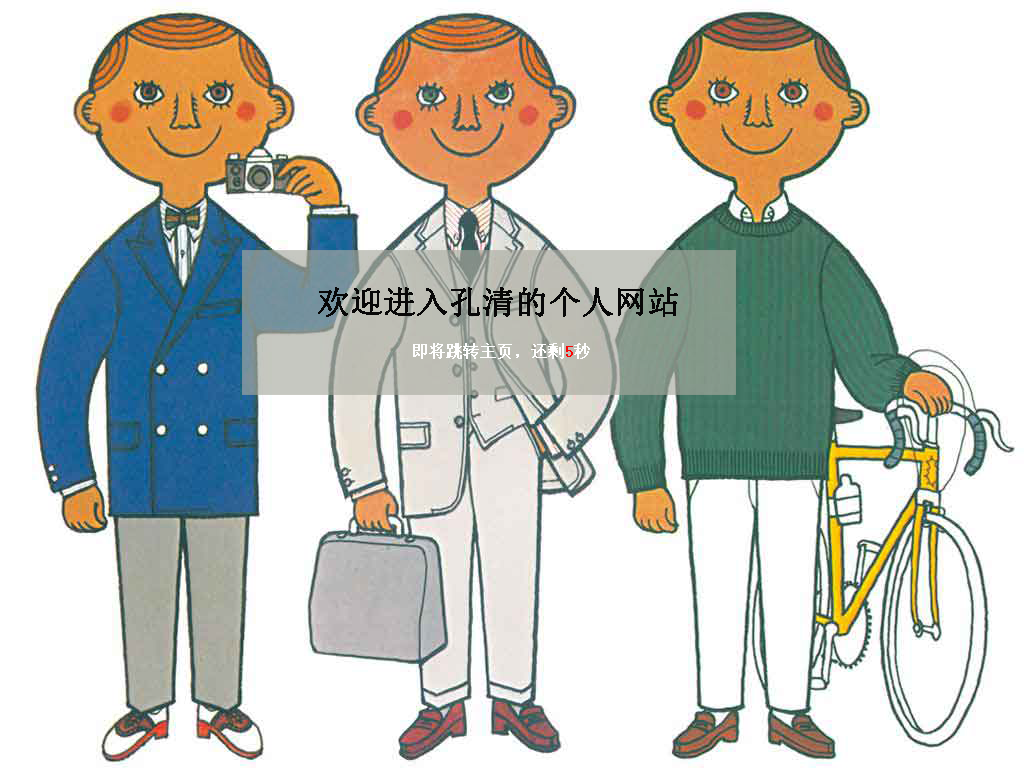
<style>
.page{position:relative;width:1024px;height:768px;background:#ffffff}
.page>*{position:absolute;margin:0}
.t1{font:32px "SimSun";color:#080808;font-weight:bold}
.t2{font:16px "SimSun";color:#fefefe;font-weight:bold}
.t3{font:16px "SimSun";color:#fd0303;font-weight:bold}
.t4{font:16px "SimSun";color:#fdfdfd;font-weight:bold}
</style>
<div class="page">
<p class="t1" style="left:318px;top:287px;width:360px;height:30px">欢迎进入孔清的个人网站</p>
<p class="t2" style="left:413px;top:343px;width:177px;height:16px">即将跳转主页，还剩<span class="t3">5</span><span class="t4">秒</span></p>
</div>
